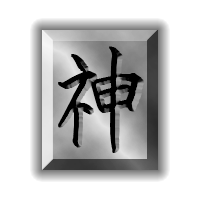
<style>
.page{position:relative;width:200px;height:200px;background:#ffffff}
.page>*{position:absolute;margin:0}
.t1{font:103.5px "ackaisyo";font-weight:bold;scale:0.87 1}
</style>
<div class="page">
<p class="t1" style="left:58px;top:46px;width:86px;height:107px">神</p>
</div>
